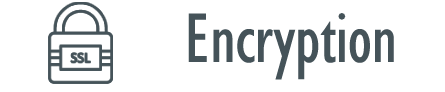
<style>
.page{position:relative;width:445px;height:92px;background:#ffffff}
.page>*{position:absolute;margin:0}
.t1{font:72px "GillSansMT-Condensed";letter-spacing:-0.01em;color:#455359}
</style>
<div class="page">
<p class="t1" style="left:188px;top:13px;width:206px;height:67px">Encryption</p>
</div>
